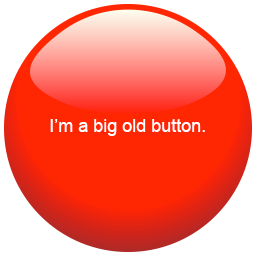
<style>
.page{position:relative;width:256px;height:256px;background:#ff2602}
.page>*{position:absolute;margin:0}
.t1{font:18px "ArialMT";color:#ffffff}
</style>
<div class="page">
<p class="t1" style="left:50px;top:119px;width:155px;height:17px">I’m a big old button.</p>
</div>
